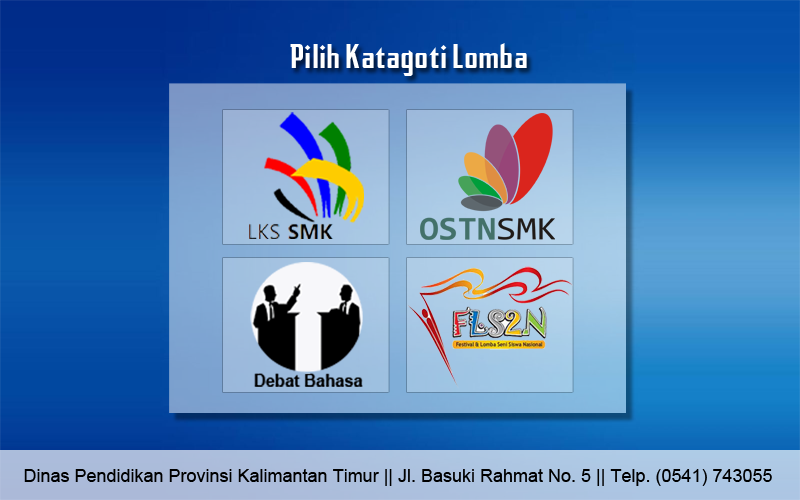
<style>
.page{position:relative;width:800px;height:500px}
.page>*{position:absolute;margin:0}
.t1{font:33.1px "AfterDisaster";color:#ffffff}
.t2{font:18px "ArialMT";color:#000000}
</style>
<div class="page">
<p class="t1" style="left:290px;top:43px;width:237px;height:33px">Pilih Katagoti Lomba</p>
<p class="t2" style="left:24px;top:469px;width:748px;height:17px">Dinas Pendidikan Provinsi Kalimantan Timur || Jl. Basuki Rahmat No. 5 || Telp. (0541) 743055</p>
</div>
